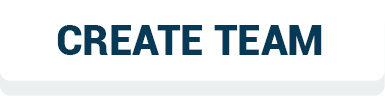
<style>
.page{position:relative;width:385px;height:96px;background:#ffffff}
.page>*{position:absolute;margin:0}
.t1{font:41.7px "Roboto-Black";color:#063956}
</style>
<div class="page">
<p class="t1" style="left:57px;top:25px;width:265px;height:30px">CREATE TEAM</p>
</div>
